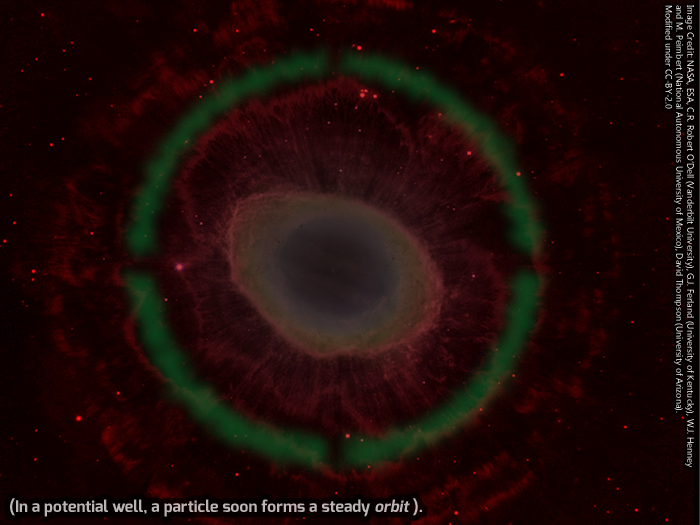
<style>
.page{position:relative;width:700px;height:525px}
.page>*{position:absolute;margin:0}
.t1{font:9px "Gadugi";color:#ffffff}
.t2{font:16px "Exo-Bold";color:#bbb5b5}
.t3{font:16px "Exo-Bold";color:#bbb5b5;font-style:italic}
</style>
<div class="page">
<p class="t1" style="left:665px;top:5px;width:29px;height:463px;rotate:90deg">Image Credit: NASA, ESA, C.R. Robert O’Dell (Vanderbilt University), G.J. Ferland (University of Kentucky), W.J. Henney <br>and M. Peimbert (National Autonomous University of Mexico), David Thompson (University of Arizona).  <br>Modified under CC-BY-2.0</p>
<p class="t2" style="left:10px;top:498px;width:412px;height:19px">(In a potential well, a particle soon forms a steady <span class="t3">orbit </span>).</p>
</div>
